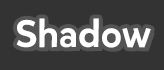
<style>
.page{position:relative;width:164px;height:70px;background:#333333}
.page>*{position:absolute;margin:0}
.t1{font:38px "MikadoMedium";color:#ffffff}
</style>
<div class="page">
<p class="t1" style="left:16px;top:18px;width:135px;height:30px">Shadow</p>
</div>
